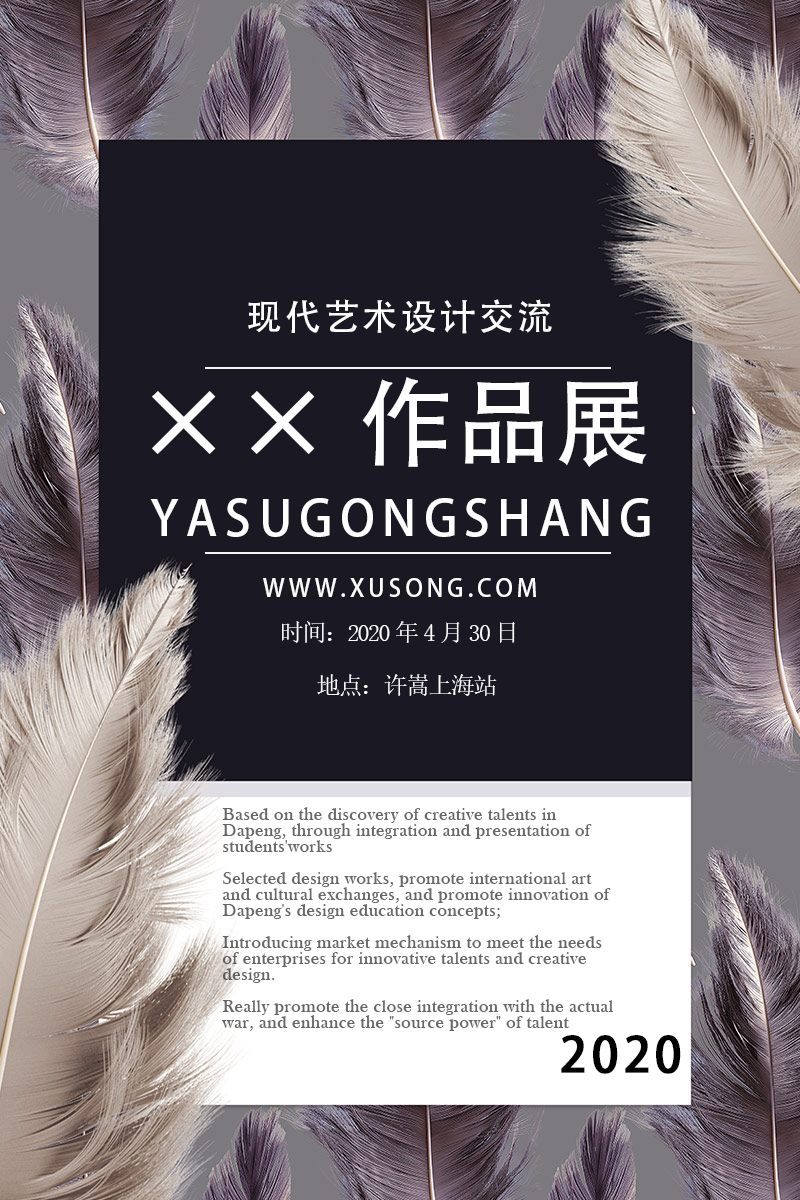
<style>
.page{position:relative;width:800px;height:1200px;background:#1a1823}
.page>*{position:absolute;margin:0}
.t1{font:36px "AdobeHeitiStd-Regular";letter-spacing:0.075em;color:#fefefe}
.t2{font:97px "AdobeHeitiStd-Regular";letter-spacing:0.015em;color:#fefefe}
.t3{font:48px "AdobeHeitiStd-Regular";letter-spacing:0.155em;color:#fefefe}
.t4{font:24px "AdobeHeitiStd-Regular";letter-spacing:0.155em;color:#fefefe}
.t5{font:24px "SimSun";letter-spacing:-0.065em;color:#fefefe}
.t6{font:18px/16px "BaskOldFace";letter-spacing:0.03em;color:#676767}
.t7{font:48px "AdobeHeitiStd-Regular";letter-spacing:0.07em;color:#010000;font-weight:bold}
</style>
<div class="page">
<p class="t1" style="left:248px;top:299px;width:304px;height:35px">现代艺术设计交流</p>
<p class="t2" style="left:152px;top:377px;width:495px;height:90px">××作品展</p>
<p class="t3" style="left:150px;top:498px;width:500px;height:39px">YASUGONGSHANG</p>
<p class="t4" style="left:263px;top:578px;width:273px;height:19px">WWW.XUSONG.COM</p>
<p class="t5" style="left:282px;top:621px;width:233px;height:22px">时间：2020年4月30日</p>
<p class="t5" style="left:317px;top:674px;width:180px;height:22px">地点：许嵩上海站</p>
<p class="t6" style="left:221px;top:807px;width:392px;height:224px">Based on the discovery of creative talents in Dapeng, through integration and presentation of students'works<br><br>Selected design works, promote international art and cultural exchanges, and promote innovation of Dapeng's design education concepts;<br><br>Introducing market mechanism to meet the needs of enterprises for innovative talents and creative design.<br><br>Really promote the close integration with the actual war, and enhance the "source power" of talent output of Dapeng</p>
<p class="t7" style="left:561px;top:1035px;width:120px;height:39px">2020</p>
</div>
